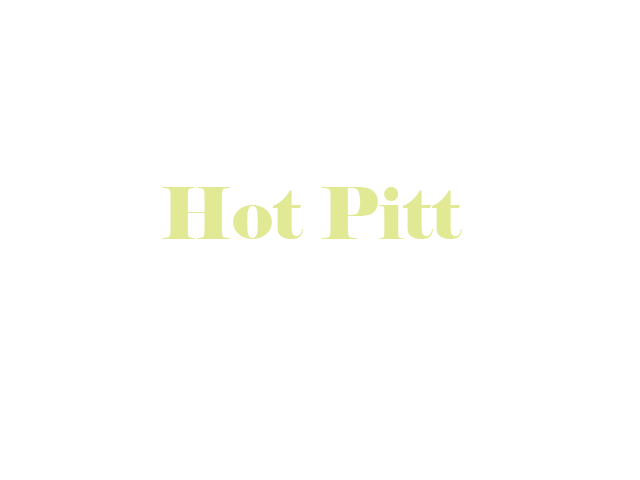
<style>
.page{position:relative;width:640px;height:480px;background:#ffffff}
.page>*{position:absolute;margin:0}
.t1{font:72px "Elephant-Regular";color:#e2e994}
</style>
<div class="page">
<p class="t1" style="left:162px;top:187px;width:300px;height:52px">Hot Pitt</p>
</div>
